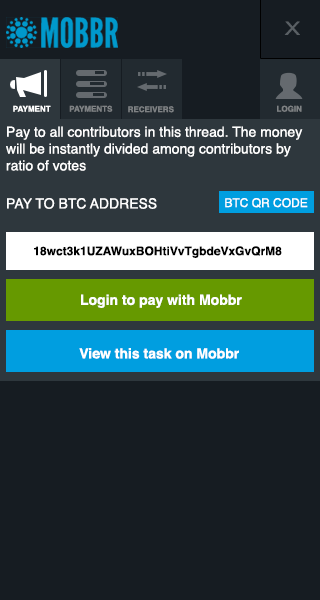
<style>
.page{position:relative;width:320px;height:600px;background:#161c22}
.page>*{position:absolute;margin:0}
.t1{font:9.3px "ArialNarrow";color:#595f64;scale:1.52 1}
.t2{font:8px "Helvetica-Bold";color:#ffffff}
.t3{font:8px "Helvetica-Bold";color:#7f8284}
.t4{font:14px "Helvetica";color:#ffffff}
.t5{font:12px "Helvetica";color:#ffffff}
.t6{font:12px "Helvetica-Bold";color:#000000}
.t7{font:14px "Helvetica-Bold";color:#ffffff}
</style>
<div class="page">
<p class="t1" style="left:284px;top:21px;width:16px;height:14px">X</p>
<p class="t2" style="left:13px;top:105px;width:38px;height:7px">PAYMENT</p>
<p class="t3" style="left:69px;top:105px;width:44px;height:7px">PAYMENTS</p>
<p class="t3" style="left:128px;top:106px;width:46px;height:7px">RECEIVERS</p>
<p class="t3" style="left:277px;top:105px;width:25px;height:7px">LOGIN</p>
<p class="t4" style="left:6px;top:126px;width:297px;height:45px">Pay to all contributors in this thread. The money will be instantly divided among contributors by ratio of votes</p>
<p class="t4" style="left:7px;top:198px;width:150px;height:11px">PAY TO BTC ADDRESS</p>
<p class="t5" style="left:225px;top:198px;width:83px;height:10px">BTC QR CODE</p>
<p class="t6" style="left:34px;top:246px;width:248px;height:12px">18wct3k1UZAWuxBOHtiVvTgbdeVxGvQrM8</p>
<p class="t7" style="left:81px;top:294px;width:161px;height:14px">Login to pay with Mobbr</p>
<p class="t7" style="left:79px;top:348px;width:160px;height:11px">View this task on Mobbr</p>
</div>
